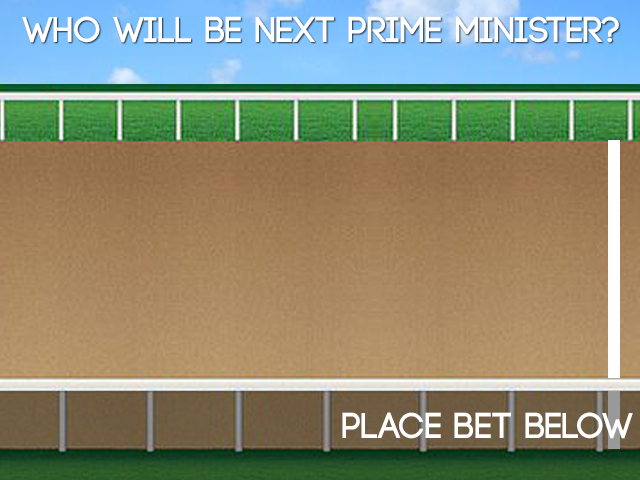
<style>
.page{position:relative;width:640px;height:480px}
.page>*{position:absolute;margin:0}
.t1{font:36px "Code-Bold";color:#ffffff}
</style>
<div class="page">
<p class="t1" style="left:22px;top:16px;width:597px;height:27px">WHO WILL BE NEXT PRIME MINISTER?</p>
<p class="t1" style="left:342px;top:412px;width:291px;height:27px">PLACE BET BELOW</p>
</div>
